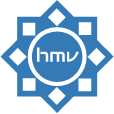
<style>
.page{position:relative;width:114px;height:114px;background:#ffffff}
.page>*{position:absolute;margin:0}
.t1{font:18.9px "Audiowide-Regular";color:#ffffff}
</style>
<div class="page">
<p class="t1" style="left:37px;top:47px;width:42px;height:15px">hmv</p>
</div>
